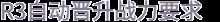
<style>
.page{position:relative;width:220px;height:22px;background:#000000}
.page>*{position:absolute;margin:0}
.t1{font:22px "WebPSD-18463539-0-Regular";color:#837a91;font-weight:bold}
</style>
<div class="page">
<p class="t1" style="left:0px;top:0px;width:220px;height:22px">R3自动晋升战力要求</p>
</div>
